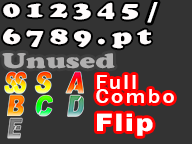
<style>
.page{position:relative;width:192px;height:144px;background:#333333}
.page>*{position:absolute;margin:0}
.t1{font:22.5px/27px "CooperBlackStd";letter-spacing:0.2em;color:#fefbfb;scale:1.27 1}
.t2{font:24.3px "KozGoPro-Heavy";letter-spacing:0.05em;color:#ffffff;scale:1.11 1}
.t3{font:21px "CooperBlackStd";color:#b0afaf;scale:1.33 1}
.t4{font:20.2px/13.5px "FranklinGothic-Medium";letter-spacing:0.1em;color:#fefbfb;scale:1.13 1}
.t5{font:24.3px "Arial-Black";letter-spacing:0.05em;color:#ffffff;scale:1.11 1}
</style>
<div class="page">
<p class="t1" style="left:3px;top:2px;width:149px;height:47px">012345<br>6789.pt</p>
<p class="t2" style="left:147px;top:2px;width:11px;height:21px">/</p>
<p class="t3" style="left:2px;top:53px;width:113px;height:16px">Unused</p>
<p class="t4" style="left:96px;top:75px;width:78px;height:28px">Full<br>Combo</p>
<p class="t5" style="left:97px;top:113px;width:56px;height:23px">Flip</p>
</div>
